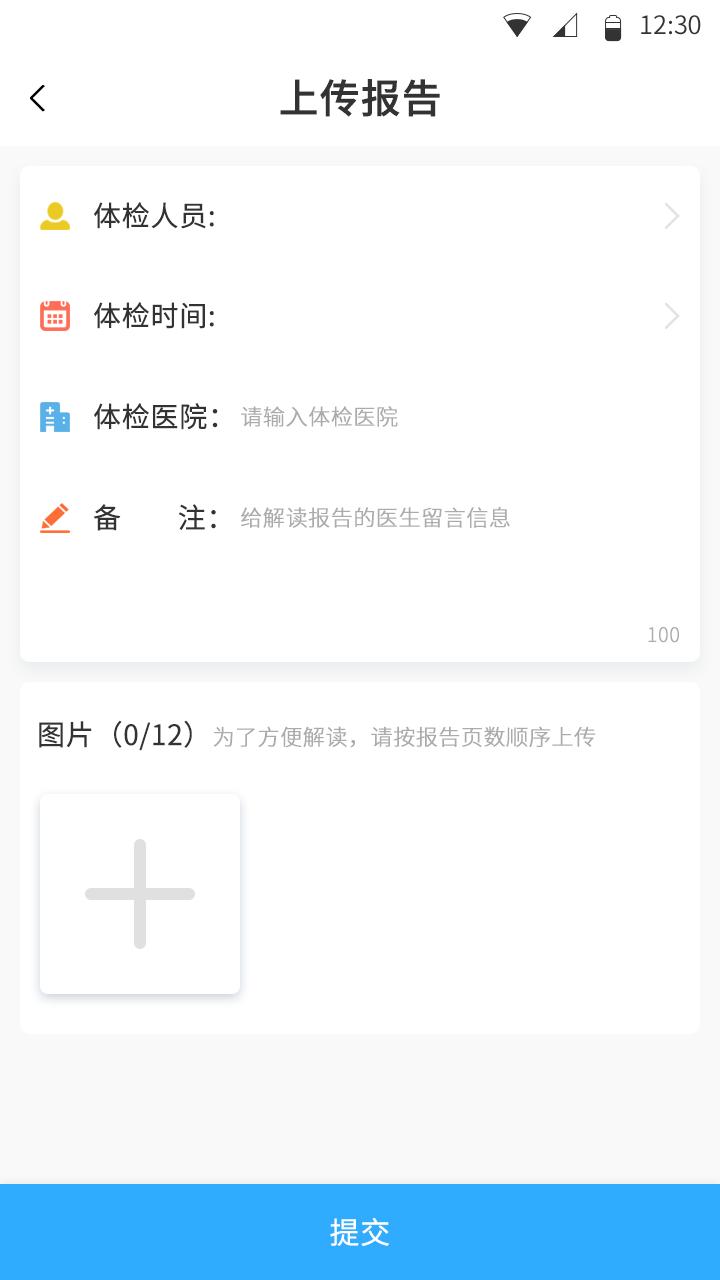
<style>
.page{position:relative;width:720px;height:1280px;background:#ffffff}
.page>*{position:absolute;margin:0}
.t1{font:25.4px "SourceHanSansCN-Normal";color:#333333}
.t2{font:40px "SourceHanSansCN-Medium";color:#333333;font-weight:bold}
.t3{font:28px "SourceHanSansCN-Normal";color:#333333;font-weight:bold}
.t4{font:22px "SourceHanSansCN-Light";color:#ababab;font-weight:bold}
.t5{font:20px "SourceHanSansCN-Light";color:#ababab;font-weight:bold}
.t6{font:30px "SourceHanSansCN-Normal";color:#ffffff;font-weight:bold}
</style>
<div class="page">
<p class="t1" style="left:641px;top:15px;width:60px;height:20px">12:30</p>
<p class="t2" style="left:280px;top:79px;width:160px;height:38px">上传报告</p>
<p class="t3" style="left:94px;top:202px;width:120px;height:27px">体检人员:</p>
<p class="t3" style="left:94px;top:302px;width:120px;height:27px">体检时间:</p>
<p class="t3" style="left:94px;top:403px;width:124px;height:27px">体检医院：</p>
<p class="t4" style="left:241px;top:406px;width:157px;height:21px">请输入体检医院</p>
<p class="t3" style="left:93px;top:504px;width:123px;height:27px">备        注：</p>
<p class="t4" style="left:241px;top:507px;width:269px;height:21px">给解读报告的医生留言信息</p>
<p class="t5" style="left:648px;top:627px;width:31px;height:16px">100</p>
<p class="t4" style="left:39px;top:720px;width:557px;height:31px"><span class="t3">图片（0/12）</span>为了方便解读，请按报告页数顺序上传</p>
<p class="t6" style="left:330px;top:1217px;width:59px;height:29px">提交</p>
</div>
